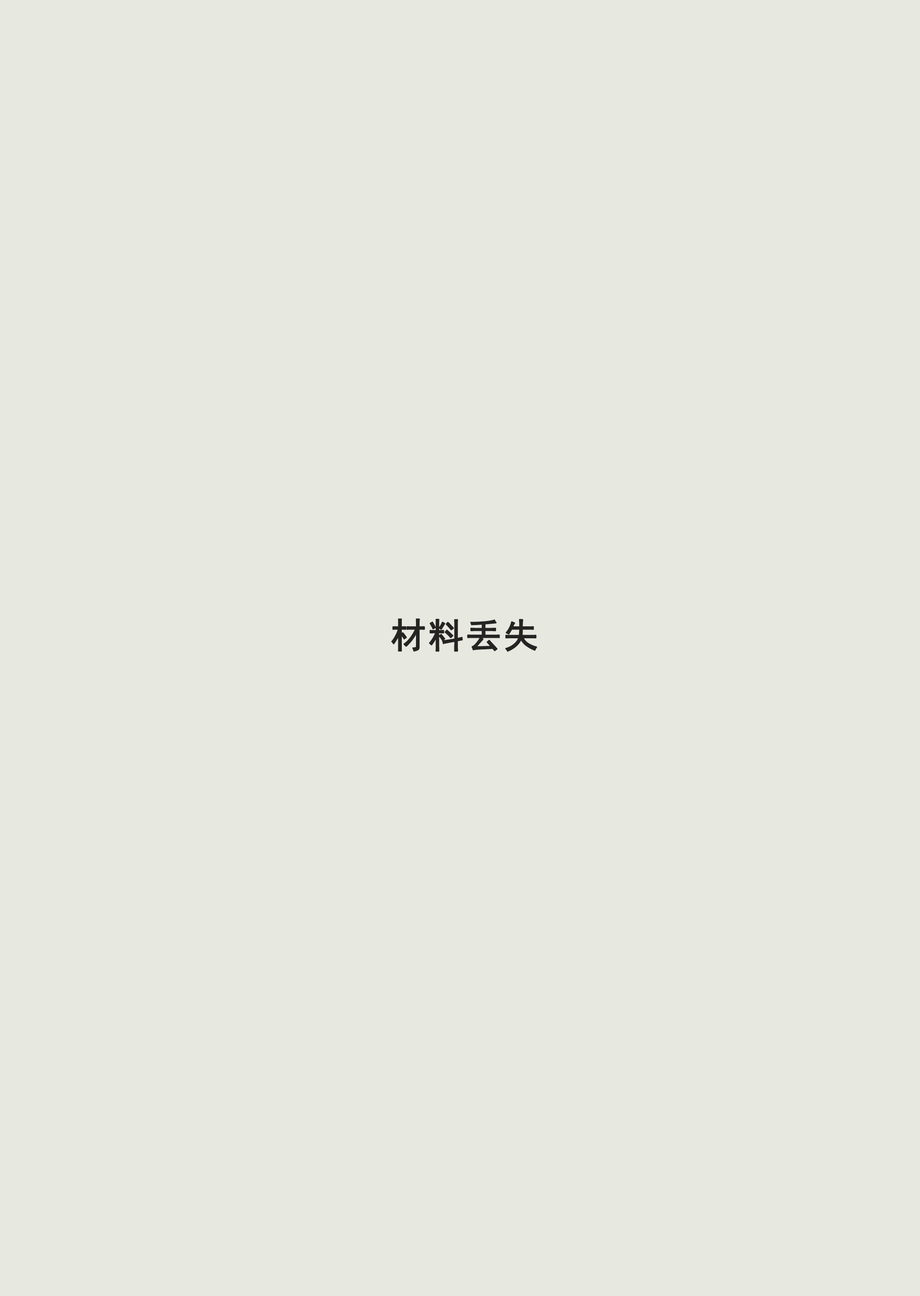
<style>
.page{position:relative;width:920px;height:1296px;background:#e7e8e0}
.page>*{position:absolute;margin:0}
.t1{font:35.4px "SimHei";letter-spacing:0.035em;color:#252422;font-weight:bold}
</style>
<div class="page">
<p class="t1" style="left:391px;top:619px;width:146px;height:33px">材料丢失</p>
</div>
